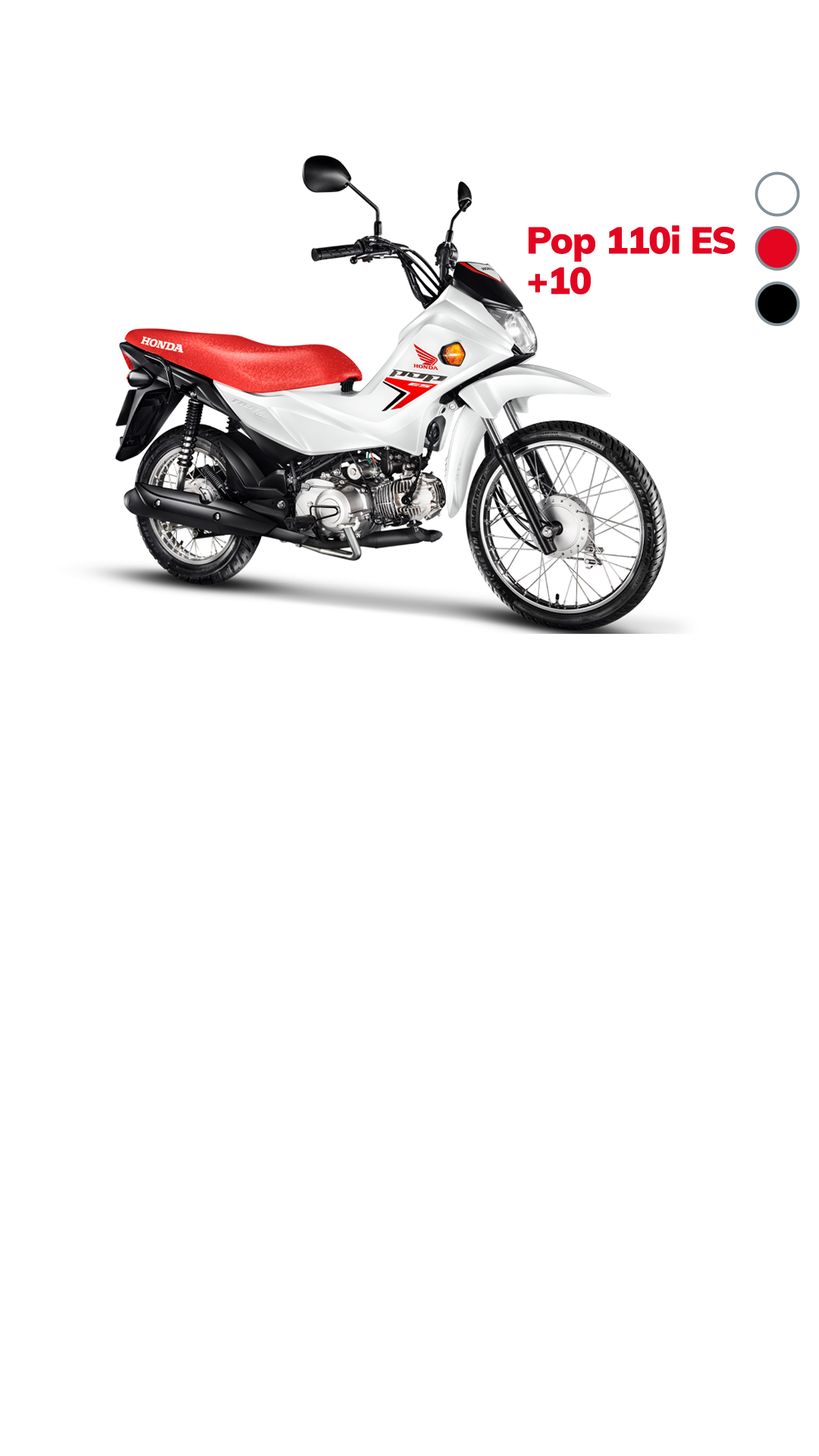
<style>
.page{position:relative;width:819px;height:1456px;background:#ffffff}
.page>*{position:absolute;margin:0}
.t1{font:37.1px/40.3px "Mulish-Black";letter-spacing:-0.02em;color:#e30520}
</style>
<div class="page">
<p class="t1" style="left:528px;top:225px;width:208px;height:70px">Pop 110i ES<br>+10</p>
</div>
